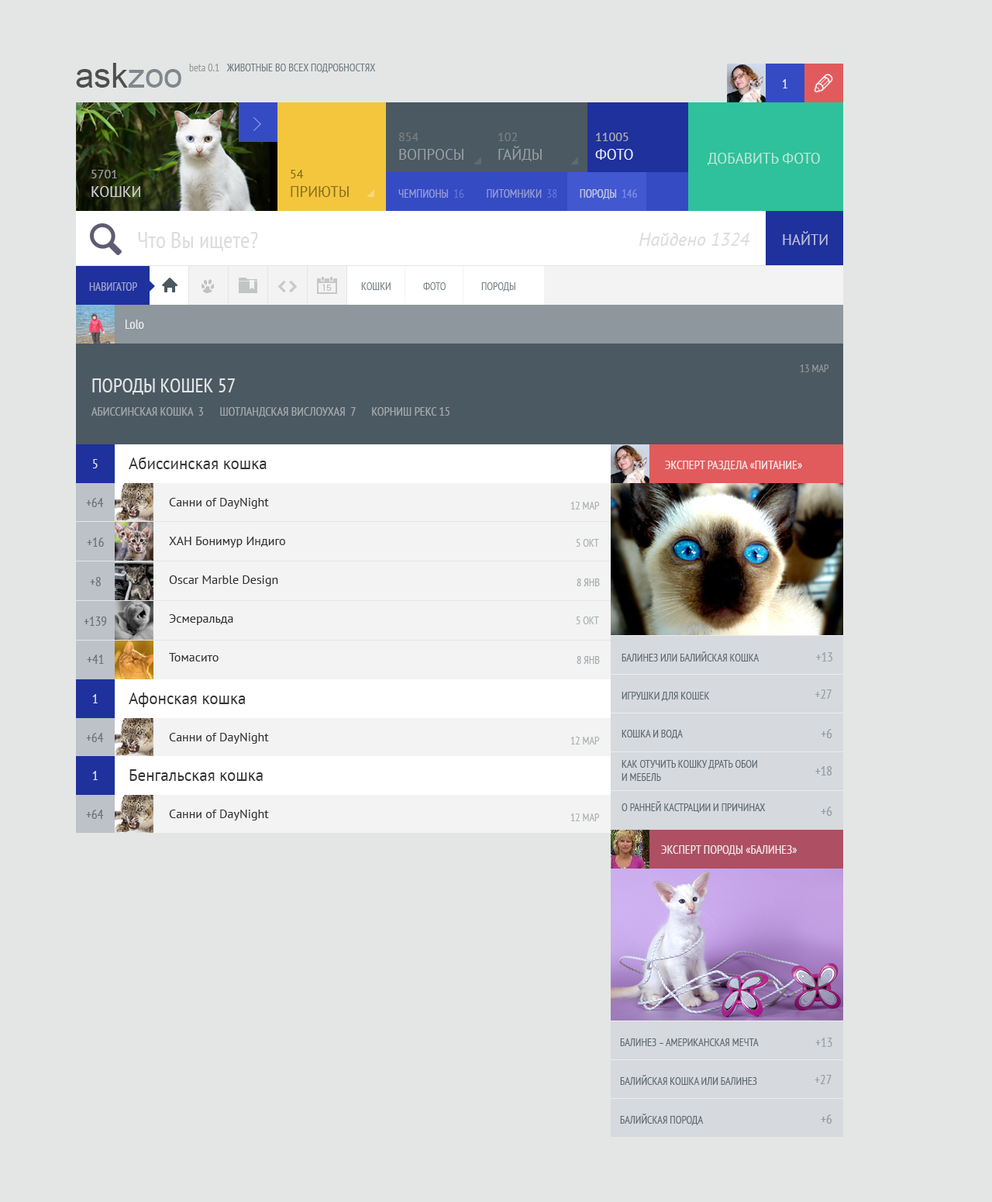
<style>
.page{position:relative;width:992px;height:1202px;background:#e4e6e5}
.page>*{position:absolute;margin:0}
.t1{font:34.1px "ArialMT"}
.t2{font:10.9px "PTSans-Narrow";color:#9a9c9b}
.t3{font:10.9px "PTSans-Narrow";color:#737d82;text-transform:uppercase}
.t4{font:13.2px "PTSans-Narrow";color:#e1e3f4}
.t5{font:14.7px/18.6px "PTSans-Regular";color:#989ea3;text-transform:uppercase}
.t6{font:12.4px/18.6px "PTSans-Regular";color:#989ea3;text-transform:uppercase}
.t7{font:12.4px/18.6px "PTSans-Regular";color:#aeaeae;text-transform:uppercase}
.t8{font:14.7px/18.6px "PTSans-Regular";color:#ebecee;text-transform:uppercase}
.t9{font:14.7px "PTSans-Regular";color:#bee7db;text-transform:uppercase}
.t10{font:14.7px/18.6px "PTSans-Regular";color:#cdcecf;text-transform:uppercase}
.t11{font:12.4px/18.6px "PTSans-Regular";color:#cdcecf;text-transform:uppercase}
.t12{font:14.7px/18.6px "PTSans-Regular";color:#866c1d;text-transform:uppercase}
.t13{font:12.4px/18.6px "PTSans-Regular";color:#866c1d;text-transform:uppercase}
.t14{font:11.6px "PTSans-Narrow";text-transform:uppercase}
.t15{font:11.6px "PTSans-Narrow";color:#bac0e5;text-transform:uppercase}
.t16{font:23.3px "PTSans-Narrow";color:#dddddd}
.t17{font:18.6px "PTSans-Italic";color:#dddddd}
.t18{font:14.7px "PTSans-Regular";color:#bcbfdb;text-transform:uppercase}
.t19{font:11.6px "PTSans-Narrow";color:#9ea3cd;text-transform:uppercase}
.t20{font:10.9px "PTSans-Narrow";color:#7b848a;text-transform:uppercase}
.t21{font:13.2px "PTSans-Narrow";color:#ffffff}
.t22{font:10.9px "PTSans-Narrow";color:#90979c}
.t23{font:20.2px "PTSans-Narrow";color:#e3e4e5;text-transform:uppercase}
.t24{font:12.4px "PTSans-Narrow";color:#a2a8ac;text-transform:uppercase}
.t25{font:13.2px "PTSans-Narrow";color:#dfe0ed}
.t26{font:16.3px "PTSans-Regular";color:#343434}
.t27{font:13.2px "PTSans-Narrow";color:#67727a}
.t28{font:12.4px/38.8px "PTSans-Regular";color:#313131}
.t29{font:10.9px "PTSans-Narrow";color:#abb0b3;text-transform:uppercase}
.t30{font:10.9px "PTSans-Narrow";color:#a4a9ac;text-transform:uppercase}
.t31{font:12.4px "PTSans-Regular";color:#313131}
</style>
<div class="page">
<p class="t1" style="left:76px;top:63px;width:105px;height:25px">askzoo</p>
<p class="t2" style="left:189px;top:64px;width:30px;height:7px">beta 0.1</p>
<p class="t3" style="left:226px;top:64px;width:150px;height:9px">животные во всех подробностях</p>
<p class="t4" style="left:782px;top:79px;width:6px;height:9px">1</p>
<p class="t5" style="left:399px;top:133px;width:65px;height:27px"><span class="t6">854<br></span>вопросы</p>
<p class="t5" style="left:498px;top:133px;width:44px;height:28px"><span class="t6">102<br></span>гайды</p>
<p class="t7" style="left:595px;top:133px;width:38px;height:27px">11005<br><span class="t8">фото</span></p>
<p class="t9" style="left:708px;top:153px;width:112px;height:12px">добавить фото</p>
<p class="t10" style="left:91px;top:170px;width:49px;height:27px"><span class="t11">5701<br></span>кошки</p>
<p class="t12" style="left:291px;top:170px;width:58px;height:27px"><span class="t13">54<br></span>приюты</p>
<p class="t14" style="left:398px;top:189px;width:239px;height:10px">чемпионы  16         питомники  38         породы  146</p>
<p class="t15" style="left:580px;top:189px;width:57px;height:10px">породы  146</p>
<p class="t16" style="left:138px;top:232px;width:120px;height:19px">Что Вы ищете?</p>
<p class="t17" style="left:639px;top:233px;width:111px;height:13px">Найдено 1324</p>
<p class="t18" style="left:783px;top:231px;width:45px;height:14px">Найти</p>
<p class="t19" style="left:89px;top:282px;width:48px;height:9px">навигатор</p>
<p class="t20" style="left:361px;top:282px;width:30px;height:8px">кошки</p>
<p class="t20" style="left:423px;top:282px;width:23px;height:8px">фото</p>
<p class="t20" style="left:481px;top:282px;width:35px;height:9px">породы</p>
<p class="t21" style="left:126px;top:319px;width:18px;height:10px;opacity:0.8">Lolo</p>
<p class="t22" style="left:800px;top:364px;width:30px;height:8px">13 МАР</p>
<p class="t23" style="left:92px;top:378px;width:143px;height:17px">породы кошек 57</p>
<p class="t24" style="left:91px;top:407px;width:359px;height:10px">абиссинская кошка  3      Шотландская вислоухая  7      корниш рекс 15</p>
<p class="t25" style="left:93px;top:459px;width:5px;height:9px">5</p>
<p class="t26" style="left:129px;top:457px;width:138px;height:12px">Абиссинская кошка</p>
<p class="t27" style="left:86px;top:498px;width:18px;height:9px">+64</p>
<p class="t28" style="left:169px;top:498px;width:116px;height:163px">Санни of DayNight<br>ХАН Бонимур Индиго<br>Oscar Marble Design<br>Эсмеральда<br>Томасито</p>
<p class="t29" style="left:571px;top:502px;width:29px;height:7px">12 мар</p>
<p class="t27" style="left:87px;top:537px;width:17px;height:10px">+16</p>
<p class="t29" style="left:576px;top:539px;width:23px;height:8px">5 окт</p>
<p class="t27" style="left:90px;top:577px;width:11px;height:9px">+8</p>
<p class="t30" style="left:577px;top:578px;width:23px;height:8px">8 янв</p>
<p class="t27" style="left:84px;top:616px;width:23px;height:10px">+139</p>
<p class="t29" style="left:576px;top:616px;width:23px;height:8px">5 окт</p>
<p class="t27" style="left:87px;top:654px;width:17px;height:10px">+41</p>
<p class="t30" style="left:577px;top:656px;width:23px;height:8px">8 янв</p>
<p class="t25" style="left:92px;top:694px;width:6px;height:9px">1</p>
<p class="t26" style="left:129px;top:692px;width:117px;height:15px">Афонская кошка</p>
<p class="t27" style="left:86px;top:733px;width:18px;height:9px">+64</p>
<p class="t31" style="left:169px;top:733px;width:100px;height:10px">Санни of DayNight</p>
<p class="t29" style="left:571px;top:736px;width:29px;height:8px">12 мар</p>
<p class="t25" style="left:92px;top:771px;width:6px;height:9px">1</p>
<p class="t26" style="left:129px;top:769px;width:134px;height:12px">Бенгальская кошка</p>
<p class="t27" style="left:86px;top:809px;width:18px;height:10px">+64</p>
<p class="t31" style="left:169px;top:809px;width:100px;height:11px">Санни of DayNight</p>
<p class="t29" style="left:571px;top:813px;width:29px;height:8px">12 мар</p>
</div>
